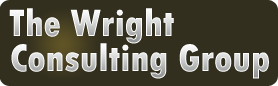
<style>
.page{position:relative;width:278px;height:86px;background:#322f1e}
.page>*{position:absolute;margin:0}
.t1{font:40px "TwCenMT-CondensedExtraBold"}
</style>
<div class="page">
<p class="t1" style="left:9px;top:8px;width:165px;height:36px">The Wright</p>
<p class="t1" style="left:11px;top:43px;width:258px;height:36px">Consulting Group</p>
</div>
